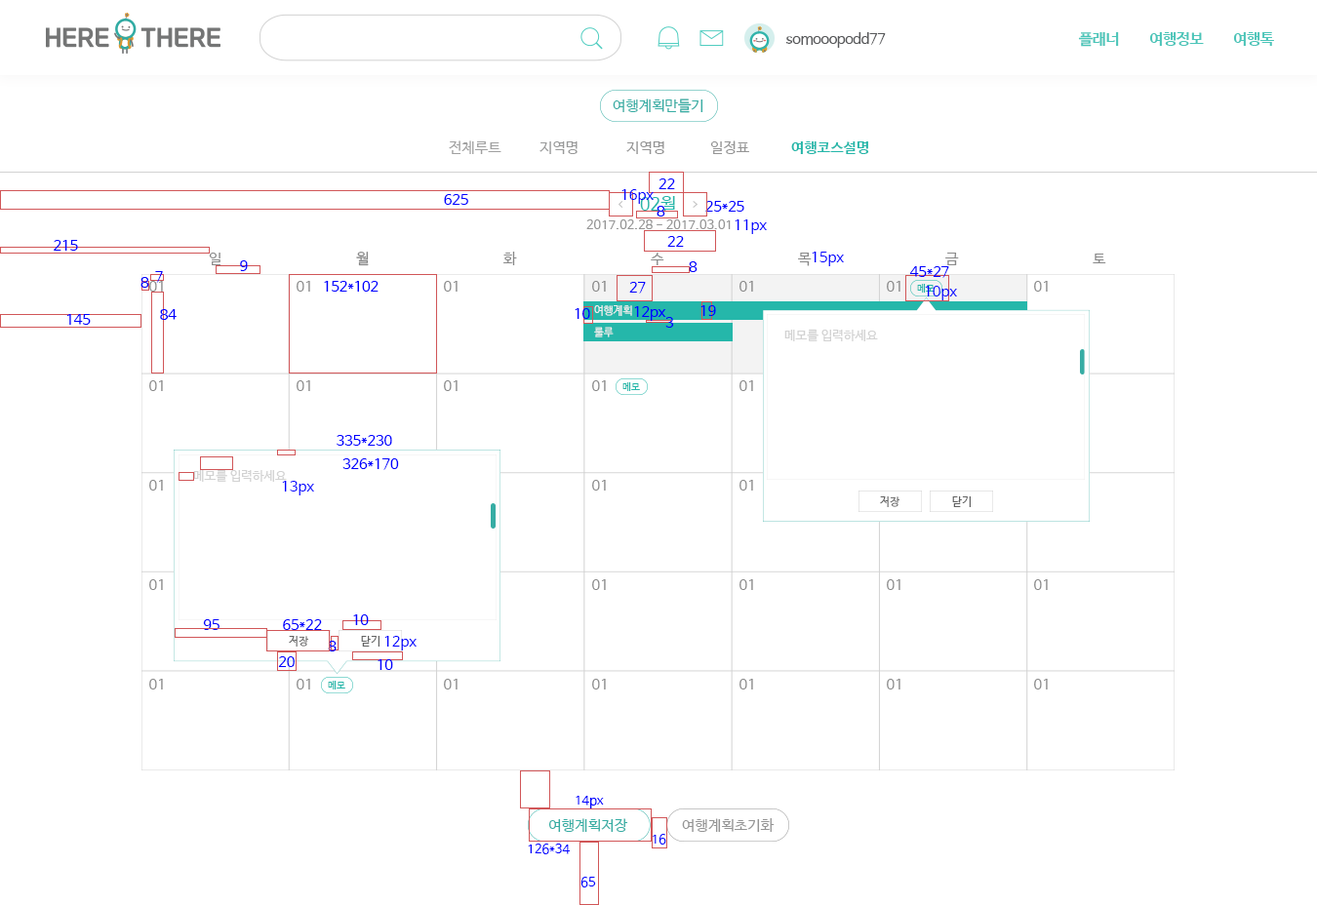
<style>
.page{position:relative;width:1317px;height:905px;background:#ffffff}
.page>*{position:absolute;margin:0}
.t1{font:14.5px "NanumBarunGothic";letter-spacing:-0.025em;color:#58595b}
.t2{font:15.4px "NanumBarunGothicBold";letter-spacing:-0.025em;color:#4bc5b9}
.t3{font:14.6px "NanumBarunGothic";color:#36ada4}
.t4{font:14.6px "NanumBarunGothic";color:#a0a0a0}
.t5{font:14.6px "NanumBarunGothic";color:#999a9a}
.t6{font:14.6px "NanumBarunGothic";color:#959595}
.t7{font:14.6px "NanumBarunGothicBold";color:#25b7aa}
.t8{font:14.2px "NanumBarunGothic";color:#0000ff}
.t9{font:14.6px "NanumBarunGothic";color:#0000ff}
.t10{font:17.6px "NanumBarunGothic";color:#25b7aa}
.t11{font:12.7px "NanumBarunGothic";color:#959595}
.t12{font:14.6px "NanumBarunGothic";color:#898989}
.t13{font:9.8px "NanumBarunGothic";color:#25b7aa}
.t14{font:10.7px "NanumBarunGothic";color:#efefef}
.t15{font:12.7px "NanumBarunGothic";color:#d2d2d2}
.t16{font:10.7px "NanumBarunGothic";letter-spacing:0.025em;color:#626262}
.t17{font:12.7px "NanumBarunGothic";color:#0000ff}
</style>
<div class="page">
<p class="t1" style="left:786px;top:32px;width:100px;height:16px">somooopodd77</p>
<p class="t2" style="left:1078px;top:32px;width:41px;height:15px">플래너</p>
<p class="t2" style="left:1149px;top:32px;width:55px;height:14px">여행정보</p>
<p class="t2" style="left:1233px;top:32px;width:41px;height:14px">여행톡</p>
<p class="t3" style="left:613px;top:99px;width:90px;height:14px">여행계획만들기</p>
<p class="t4" style="left:449px;top:140px;width:52px;height:14px">전체루트</p>
<p class="t5" style="left:540px;top:141px;width:38px;height:13px">지역명</p>
<p class="t6" style="left:626px;top:141px;width:38px;height:13px">지역명</p>
<p class="t6" style="left:710px;top:140px;width:39px;height:14px">일정표</p>
<p class="t7" style="left:791px;top:141px;width:78px;height:13px">여행코스설명</p>
<p class="t8" style="left:659px;top:179px;width:16px;height:10px">22</p>
<p class="t8" style="left:444px;top:194px;width:24px;height:11px">625</p>
<p class="t9" style="left:621px;top:189px;width:33px;height:15px">16px</p>
<p class="t10" style="left:640px;top:196px;width:36px;height:16px">02월</p>
<p class="t8" style="left:657px;top:206px;width:8px;height:11px">8</p>
<p class="t8" style="left:705px;top:201px;width:39px;height:11px">25*25</p>
<p class="t11" style="left:586px;top:220px;width:145px;height:9px">2017.02.28 - 2017.03.01</p>
<p class="t9" style="left:735px;top:220px;width:32px;height:14px">11px</p>
<p class="t8" style="left:54px;top:240px;width:24px;height:11px">215</p>
<p class="t8" style="left:667px;top:236px;width:17px;height:11px">22</p>
<p class="t12" style="left:209px;top:253px;width:12px;height:12px">일</p>
<p class="t12" style="left:356px;top:252px;width:13px;height:14px">월</p>
<p class="t12" style="left:503px;top:252px;width:14px;height:13px">화</p>
<p class="t12" style="left:651px;top:253px;width:13px;height:12px">수</p>
<p class="t12" style="left:798px;top:253px;width:14px;height:13px">목</p>
<p class="t9" style="left:812px;top:252px;width:32px;height:14px">15px</p>
<p class="t12" style="left:945px;top:253px;width:14px;height:12px">금</p>
<p class="t12" style="left:1093px;top:254px;width:13px;height:9px">토</p>
<p class="t8" style="left:240px;top:260px;width:8px;height:11px">9</p>
<p class="t8" style="left:689px;top:261px;width:9px;height:11px">8</p>
<p class="t8" style="left:909px;top:266px;width:40px;height:12px">45*27</p>
<p class="t8" style="left:140px;top:277px;width:9px;height:11px">8</p>
<p class="t12" style="left:149px;top:281px;width:14px;height:11px">01</p>
<p class="t8" style="left:155px;top:271px;width:8px;height:12px">7</p>
<p class="t12" style="left:297px;top:281px;width:13px;height:11px">01</p>
<p class="t8" style="left:324px;top:281px;width:55px;height:11px">152*102</p>
<p class="t12" style="left:444px;top:281px;width:14px;height:11px">01</p>
<p class="t12" style="left:592px;top:281px;width:14px;height:11px">01</p>
<p class="t8" style="left:629px;top:282px;width:17px;height:12px">27</p>
<p class="t12" style="left:740px;top:281px;width:13px;height:11px">01</p>
<p class="t12" style="left:887px;top:281px;width:13px;height:11px">01</p>
<p class="t12" style="left:1034px;top:281px;width:14px;height:11px">01</p>
<p class="t13" style="left:917px;top:284px;width:18px;height:9px">메모</p>
<p class="t9" style="left:925px;top:286px;width:32px;height:14px">10px</p>
<p class="t14" style="left:594px;top:305px;width:38px;height:11px">여행계획</p>
<p class="t8" style="left:700px;top:305px;width:16px;height:11px">19</p>
<p class="t8" style="left:67px;top:314px;width:24px;height:11px">145</p>
<p class="t8" style="left:160px;top:309px;width:17px;height:11px">84</p>
<p class="t8" style="left:575px;top:308px;width:15px;height:11px">10</p>
<p class="t8" style="left:634px;top:306px;width:32px;height:15px">12px</p>
<p class="t8" style="left:665px;top:317px;width:9px;height:11px">3</p>
<p class="t14" style="left:594px;top:327px;width:20px;height:11px">룰루</p>
<p class="t15" style="left:784px;top:329px;width:94px;height:12px">메모를 입력하세요</p>
<p class="t12" style="left:149px;top:380px;width:14px;height:11px">01</p>
<p class="t12" style="left:297px;top:380px;width:13px;height:11px">01</p>
<p class="t12" style="left:444px;top:380px;width:14px;height:11px">01</p>
<p class="t12" style="left:592px;top:380px;width:14px;height:11px">01</p>
<p class="t13" style="left:622px;top:382px;width:18px;height:9px">메모</p>
<p class="t12" style="left:740px;top:380px;width:13px;height:11px">01</p>
<p class="t8" style="left:337px;top:435px;width:55px;height:11px">335*230</p>
<p class="t8" style="left:342px;top:459px;width:57px;height:11px">326*170</p>
<p class="t15" style="left:193px;top:469px;width:94px;height:13px">메모를 입력하세요</p>
<p class="t12" style="left:149px;top:480px;width:14px;height:11px">01</p>
<p class="t9" style="left:282px;top:481px;width:32px;height:15px">13px</p>
<p class="t12" style="left:592px;top:480px;width:14px;height:11px">01</p>
<p class="t12" style="left:740px;top:480px;width:13px;height:11px">01</p>
<p class="t16" style="left:880px;top:497px;width:20px;height:10px">저장</p>
<p class="t16" style="left:952px;top:497px;width:19px;height:10px">닫기</p>
<p class="t12" style="left:149px;top:580px;width:14px;height:10px">01</p>
<p class="t12" style="left:592px;top:580px;width:14px;height:10px">01</p>
<p class="t12" style="left:740px;top:580px;width:13px;height:10px">01</p>
<p class="t12" style="left:887px;top:580px;width:13px;height:10px">01</p>
<p class="t12" style="left:1034px;top:580px;width:14px;height:10px">01</p>
<p class="t8" style="left:353px;top:615px;width:16px;height:10px">10</p>
<p class="t8" style="left:203px;top:620px;width:17px;height:10px">95</p>
<p class="t8" style="left:283px;top:620px;width:39px;height:10px">65*22</p>
<p class="t16" style="left:289px;top:636px;width:20px;height:11px">저장</p>
<p class="t8" style="left:328px;top:641px;width:9px;height:11px">8</p>
<p class="t16" style="left:361px;top:636px;width:19px;height:11px">닫기</p>
<p class="t9" style="left:384px;top:636px;width:33px;height:15px">12px</p>
<p class="t8" style="left:278px;top:657px;width:17px;height:10px">20</p>
<p class="t8" style="left:378px;top:660px;width:15px;height:10px">10</p>
<p class="t12" style="left:149px;top:679px;width:14px;height:11px">01</p>
<p class="t12" style="left:297px;top:679px;width:13px;height:11px">01</p>
<p class="t13" style="left:328px;top:681px;width:17px;height:9px">메모</p>
<p class="t12" style="left:444px;top:679px;width:14px;height:11px">01</p>
<p class="t12" style="left:592px;top:679px;width:14px;height:11px">01</p>
<p class="t12" style="left:740px;top:679px;width:13px;height:11px">01</p>
<p class="t12" style="left:887px;top:679px;width:13px;height:11px">01</p>
<p class="t12" style="left:1034px;top:679px;width:14px;height:11px">01</p>
<p class="t17" style="left:576px;top:796px;width:28px;height:13px">14px</p>
<p class="t3" style="left:548px;top:819px;width:80px;height:13px">여행계획저장</p>
<p class="t6" style="left:682px;top:819px;width:93px;height:13px">여행계획초기화</p>
<p class="t17" style="left:528px;top:844px;width:42px;height:11px">126*34</p>
<p class="t17" style="left:653px;top:834px;width:13px;height:11px">16</p>
<p class="t17" style="left:580px;top:877px;width:16px;height:11px">65</p>
</div>
